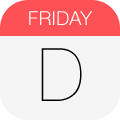
<style>
.page{position:relative;width:120px;height:120px;background:#f5f5f5}
.page>*{position:absolute;margin:0}
.t1{font:19.2px "HelveticaNeueLT-Light";letter-spacing:0.01em;color:#ffffff}
.t2{font:73.9px "HelveticaNeueLT-UltraLight";letter-spacing:-0.14em;color:#000000}
</style>
<div class="page">
<p class="t1" style="left:29px;top:11px;width:64px;height:14px">FRIDAY</p>
<p class="t2" style="left:41px;top:48px;width:41px;height:53px">D</p>
</div>
